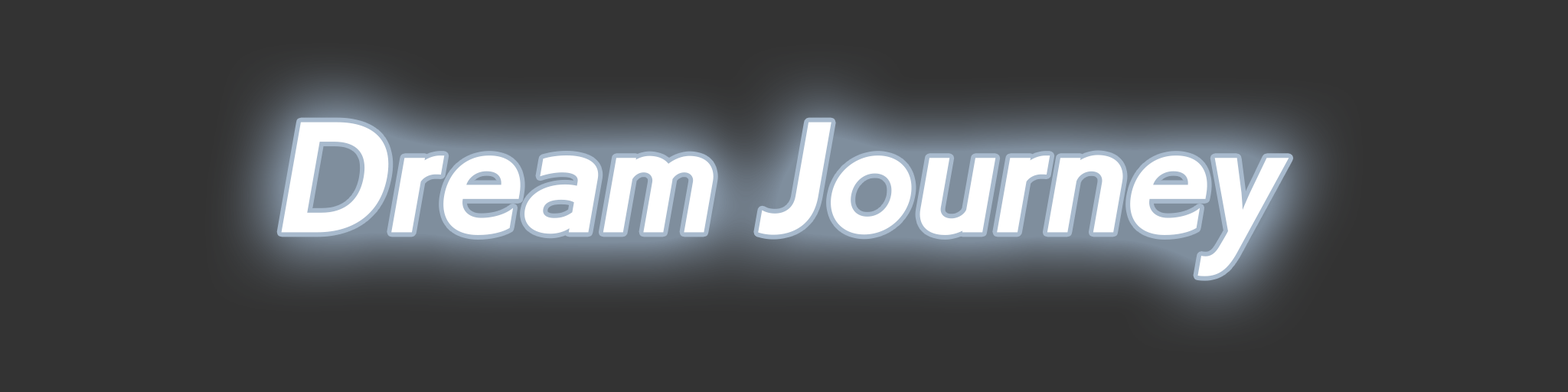
<style>
.page{position:relative;width:1568px;height:392px;background:#333333}
.page>*{position:absolute;margin:0}
.t1{font:130.2px "UMAE_UDKakugo_SmallPr6-E";letter-spacing:-0.005em;color:#ffffff;font-style:italic}
</style>
<div class="page">
<p class="t1" style="left:281px;top:122px;width:1008px;height:154px">Dream Journey</p>
</div>
